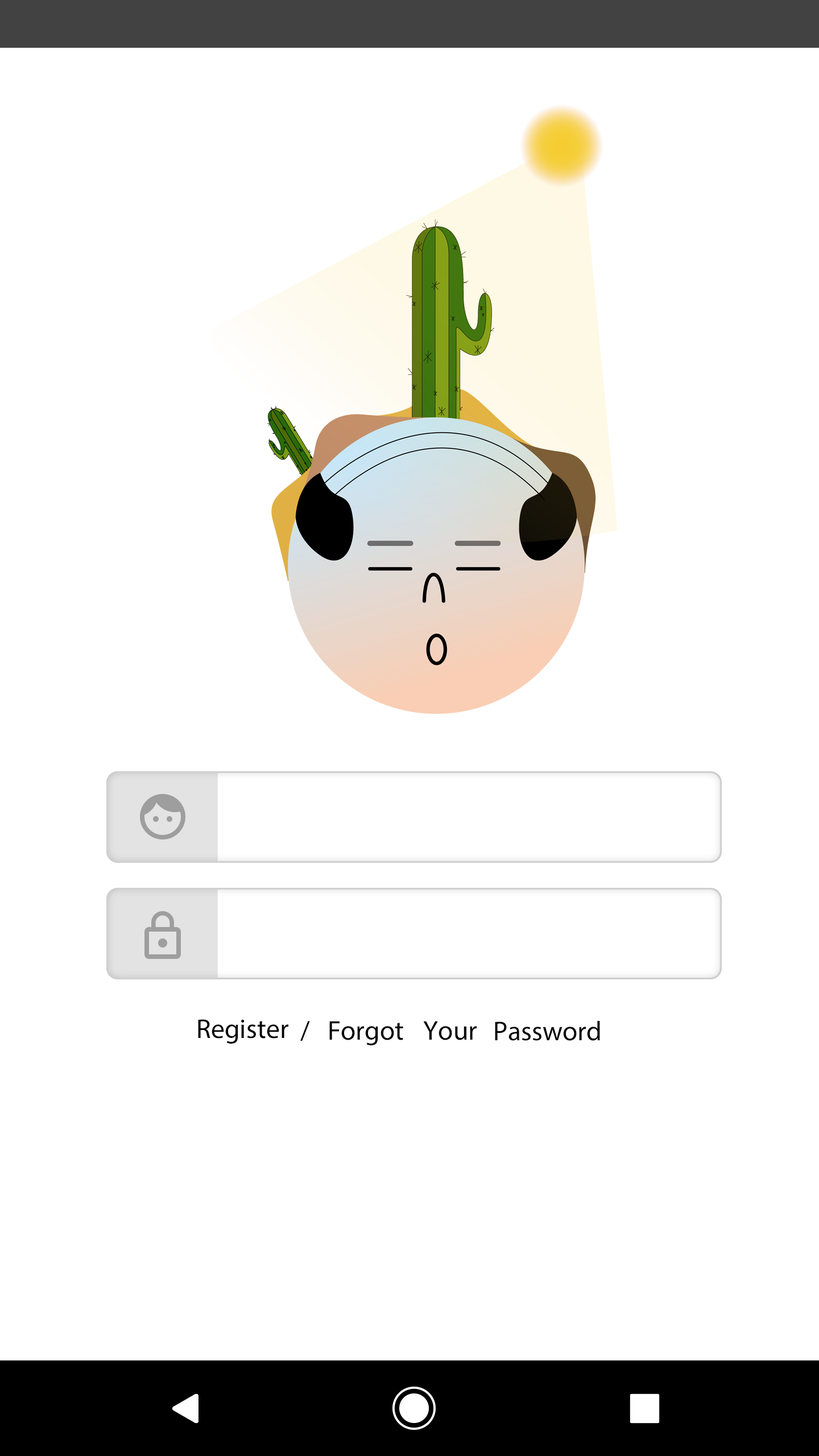
<style>
.page{position:relative;width:819px;height:1456px;background:#ffffff}
.page>*{position:absolute;margin:0}
.t1{font:27.3px "MyriadPro-Regular";color:#000000}
</style>
<div class="page">
<p class="t1" style="left:198px;top:1019px;width:90px;height:25px">Register</p>
<p class="t1" style="left:300px;top:1021px;width:10px;height:20px">/</p>
<p class="t1" style="left:329px;top:1021px;width:74px;height:24px">Forgot</p>
<p class="t1" style="left:423px;top:1021px;width:54px;height:19px">Your</p>
<p class="t1" style="left:495px;top:1021px;width:105px;height:20px">Password</p>
</div>
